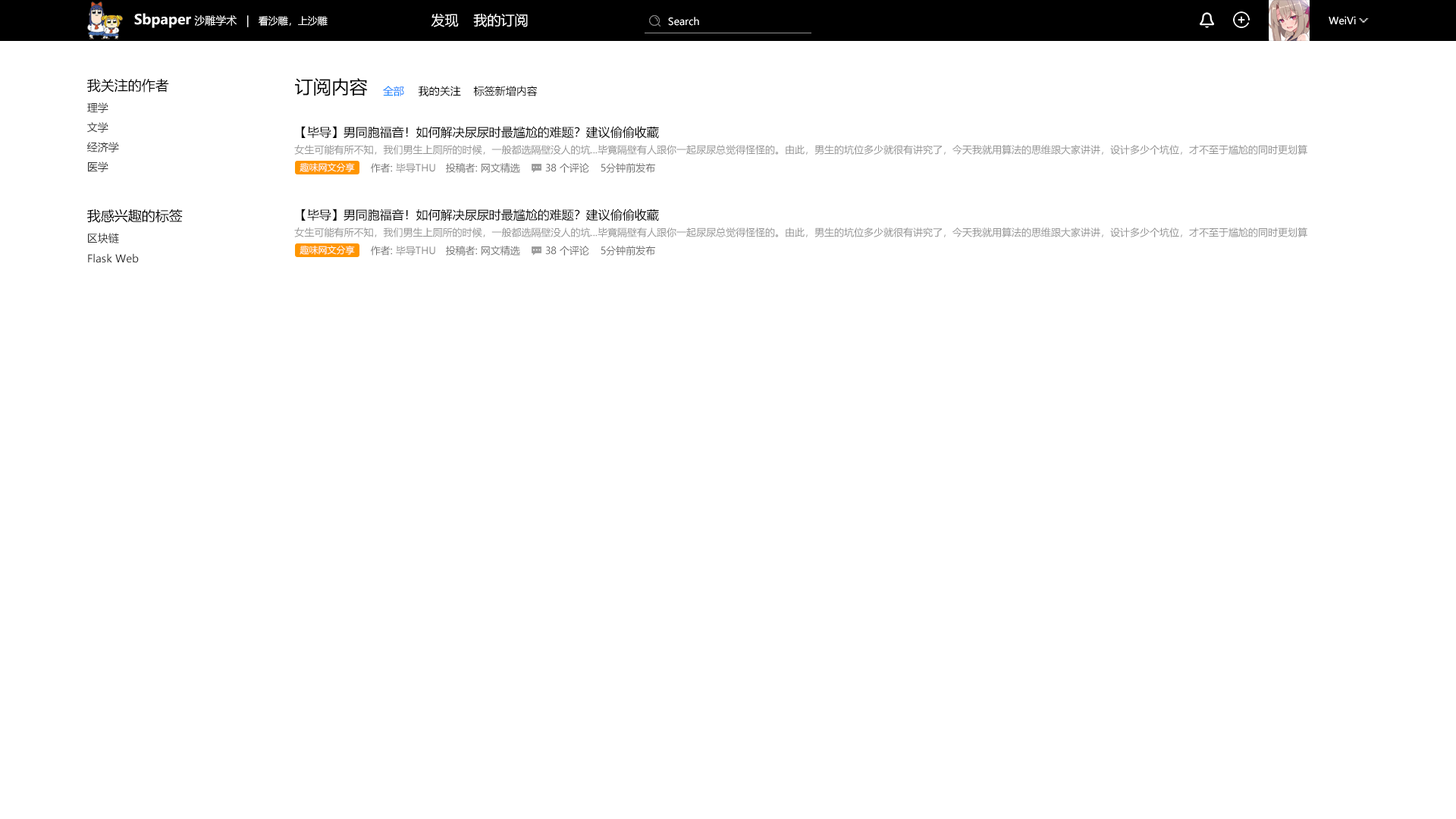
<style>
.page{position:relative;width:1456px;height:819px;background:#ffffff}
.page>*{position:absolute;margin:0}
.t1{font:10.6px "MicrosoftYaHeiUI";color:#ffffff}
.t2{font:13.6px "MicrosoftYaHeiUI-Bold";color:#ffffff}
.t3{font:9.9px "MicrosoftYaHeiUI";color:#ffffff}
.t4{font:13.6px "MicrosoftYaHeiUI";color:#ffffff}
.t5{font:13.6px "MicrosoftYaHeiUI";color:#000000}
.t6{font:18.2px "MicrosoftYaHeiUI";color:#000000}
.t7{font:10.6px "MicrosoftYaHeiUI";color:#007eff}
.t8{font:10.6px "MicrosoftYaHeiUI";color:#000000}
.t9{font:10.6px "MicrosoftYaHeiUI";color:#303030}
.t10{font:12.1px "MicrosoftYaHeiUI";color:#000000}
.t11{font:9.9px "MicrosoftYaHeiUI";color:#939393}
.t12{font:9.1px "MicrosoftYaHeiUI";color:#ffffff}
.t13{font:9.9px "MicrosoftYaHeiUI";color:#6f6f6f}
</style>
<div class="page">
<p class="t1" style="left:134px;top:13px;width:194px;height:15px"><span class="t2">Sbpaper </span>沙雕学术   |   <span class="t3">看沙雕，上沙雕</span></p>
<p class="t4" style="left:431px;top:14px;width:28px;height:13px">发现</p>
<p class="t4" style="left:473px;top:14px;width:55px;height:13px">我的订阅</p>
<p class="t3" style="left:668px;top:17px;width:31px;height:9px">Search</p>
<p class="t3" style="left:1329px;top:16px;width:27px;height:9px">WeiVi</p>
<p class="t5" style="left:87px;top:79px;width:82px;height:14px">我关注的作者</p>
<p class="t6" style="left:295px;top:78px;width:73px;height:18px">订阅内容</p>
<p class="t7" style="left:383px;top:86px;width:21px;height:10px">全部</p>
<p class="t8" style="left:418px;top:86px;width:43px;height:10px">我的关注</p>
<p class="t8" style="left:473px;top:86px;width:65px;height:10px">标签新增内容</p>
<p class="t9" style="left:87px;top:102px;width:21px;height:11px">理学</p>
<p class="t9" style="left:87px;top:122px;width:21px;height:11px">文学</p>
<p class="t10" style="left:301px;top:126px;width:358px;height:13px">【毕导】男同胞福音！如何解决尿尿时最尴尬的难题？建议偷偷收藏</p>
<p class="t9" style="left:87px;top:142px;width:32px;height:10px">经济学</p>
<p class="t11" style="left:294px;top:145px;width:1013px;height:10px">女生可能有所不知，我们男生上厕所的时候，一般都选隔壁没人的坑...毕竟隔壁有人跟你一起尿尿总觉得怪怪的。由此，男生的坑位多少就很有讲究了，今天我就用算法的思维跟大家讲讲，设计多少个坑位，才不至于尴尬的同时更划算</p>
<p class="t9" style="left:88px;top:162px;width:20px;height:10px">医学</p>
<p class="t12" style="left:300px;top:162px;width:55px;height:10px">趣味网文分享</p>
<p class="t11" style="left:371px;top:163px;width:64px;height:10px"><span class="t13">作者: </span>毕导THU</p>
<p class="t13" style="left:446px;top:163px;width:74px;height:10px">投稿者: 网文精选</p>
<p class="t13" style="left:545px;top:163px;width:44px;height:10px">38 个评论</p>
<p class="t13" style="left:601px;top:163px;width:54px;height:10px">5分钟前发布</p>
<p class="t5" style="left:87px;top:209px;width:96px;height:14px">我感兴趣的标签</p>
<p class="t10" style="left:301px;top:209px;width:358px;height:12px">【毕导】男同胞福音！如何解决尿尿时最尴尬的难题？建议偷偷收藏</p>
<p class="t9" style="left:88px;top:233px;width:31px;height:10px">区块链</p>
<p class="t11" style="left:294px;top:227px;width:1013px;height:10px">女生可能有所不知，我们男生上厕所的时候，一般都选隔壁没人的坑...毕竟隔壁有人跟你一起尿尿总觉得怪怪的。由此，男生的坑位多少就很有讲究了，今天我就用算法的思维跟大家讲讲，设计多少个坑位，才不至于尴尬的同时更划算</p>
<p class="t12" style="left:300px;top:245px;width:55px;height:10px">趣味网文分享</p>
<p class="t11" style="left:371px;top:246px;width:64px;height:10px"><span class="t13">作者: </span>毕导THU</p>
<p class="t13" style="left:446px;top:246px;width:74px;height:10px">投稿者: 网文精选</p>
<p class="t13" style="left:545px;top:246px;width:44px;height:10px">38 个评论</p>
<p class="t13" style="left:601px;top:246px;width:54px;height:10px">5分钟前发布</p>
<p class="t9" style="left:88px;top:253px;width:51px;height:10px">Flask Web</p>
</div>
